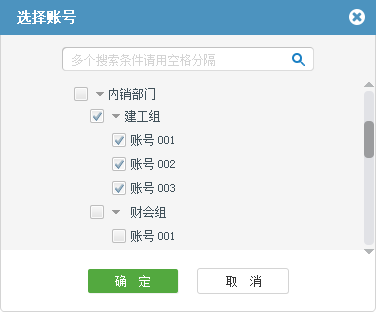
<style>
.page{position:relative;width:376px;height:312px;background:#f5f5f5}
.page>*{position:absolute;margin:0}
.t1{font:14px "SimSun";color:#ffffff;font-weight:bold}
.t2{font:12px "SimSun";color:#d4d4d4}
.t3{font:12px "SimSun";color:#41515a}
.t4{font:12px "SimSun";color:#ffffff}
.t5{font:12px "SimSun";color:#333333}
</style>
<div class="page">
<p class="t1" style="left:17px;top:10px;width:59px;height:14px">选择账号</p>
<p class="t2" style="left:72px;top:54px;width:143px;height:12px">多个搜索条件请用空格分隔</p>
<p class="t3" style="left:109px;top:88px;width:46px;height:12px">内销部门</p>
<p class="t3" style="left:125px;top:110px;width:35px;height:12px">建工组</p>
<p class="t3" style="left:131px;top:134px;width:43px;height:12px">账号001</p>
<p class="t3" style="left:131px;top:158px;width:44px;height:12px">账号002</p>
<p class="t3" style="left:131px;top:182px;width:44px;height:12px">账号003</p>
<p class="t3" style="left:131px;top:206px;width:35px;height:12px">财会组</p>
<p class="t3" style="left:131px;top:230px;width:43px;height:12px">账号001</p>
<p class="t4" style="left:115px;top:275px;width:35px;height:12px">确  定</p>
<p class="t5" style="left:226px;top:275px;width:35px;height:12px">取  消</p>
</div>
